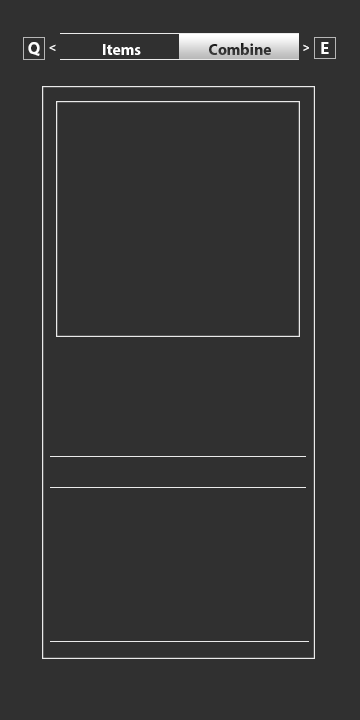
<style>
.page{position:relative;width:360px;height:720px;background:#303030}
.page>*{position:absolute;margin:0}
.t1{font:17.3px "MyriadPro-Bold";color:#ffffff}
.t2{font:11.8px "MyriadPro-Bold";color:#ffffff}
.t3{font:16px "MyriadPro-Bold";color:#ffffff}
.t4{font:16px "MyriadPro-Bold";color:#2f2f2f}
.t5{font:17px "MyriadPro-Bold";color:#ffffff}
</style>
<div class="page">
<p class="t1" style="left:28px;top:42px;width:12px;height:14px">Q</p>
<p class="t2" style="left:49px;top:44px;width:7px;height:7px">&lt;</p>
<p class="t3" style="left:103px;top:44px;width:38px;height:11px">Items</p>
<p class="t4" style="left:209px;top:43px;width:62px;height:12px">Combine</p>
<p class="t2" style="left:303px;top:44px;width:6px;height:7px;rotate:180deg">&lt;</p>
<p class="t5" style="left:321px;top:42px;width:8px;height:12px">E</p>
</div>
